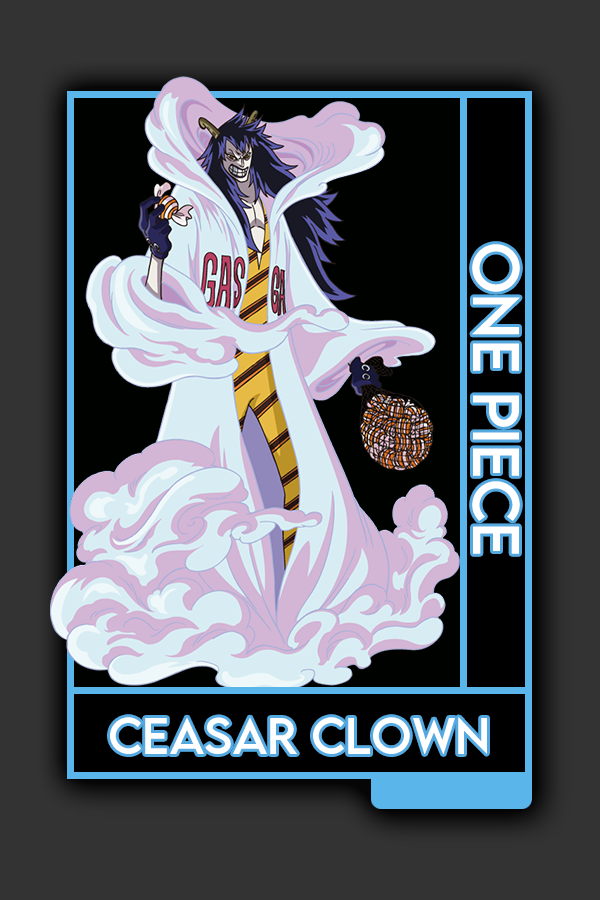
<style>
.page{position:relative;width:600px;height:900px;background:#333333}
.page>*{position:absolute;margin:0}
.t1{font:58.4px "LEMONMILK-Regular";color:#ffffff}
.t2{font:45.6px "LEMONMILK-Regular";color:#ffffff}
</style>
<div class="page">
<p class="t1" style="left:472px;top:244px;width:48px;height:310px;rotate:90deg">One Piece</p>
<p class="t2" style="left:110px;top:717px;width:377px;height:37px">Ceasar Clown</p>
</div>
